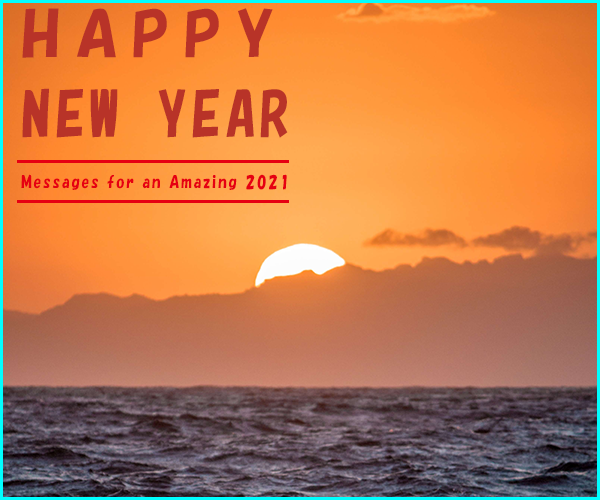
<style>
.page{position:relative;width:600px;height:500px}
.page>*{position:absolute;margin:0}
.t1{font:60px/80px "HGSoeiKakupoptai";color:#b83328}
.t2{font:60px/80px "HGSSoeiKakupoptai";color:#b83328}
.t3{font:16.3px "HGSSoeiKakupoptai";color:#e60012;scale:0.89 1}
</style>
<div class="page">
<p class="t1" style="left:22px;top:8px;width:266px;height:130px;text-align:justify"><span class="t2">HAPPY </span>NEW YEAR</p>
<p class="t3" style="left:21px;top:174px;width:266px;height:16px">Messages for an Amazing 2021</p>
</div>
